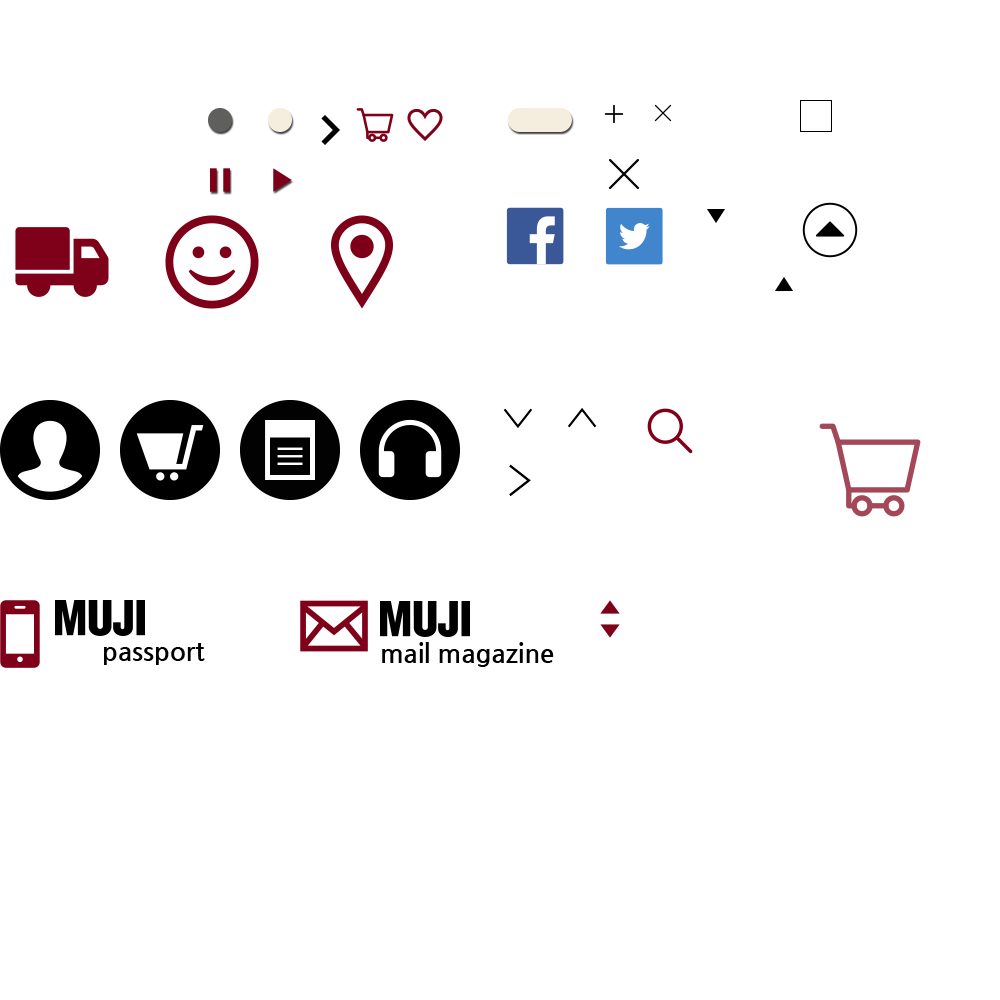
<style>
.page{position:relative;width:1000px;height:1000px;background:#ffffff}
.page>*{position:absolute;margin:0}
.t1{font:26px/50px "NanumGothicBold";color:#000000}
.t2{font:30px/50px "NanumGothicBold";color:#000000}
.t3{font:26px "NanumGothicBold";color:#000000}
</style>
<div class="page">
<p class="t1" style="left:104px;top:643px;width:101px;height:22px">passport<br><span class="t2"><br>rt</span></p>
<p class="t3" style="left:382px;top:642px;width:172px;height:25px">mail magazine</p>
</div>
